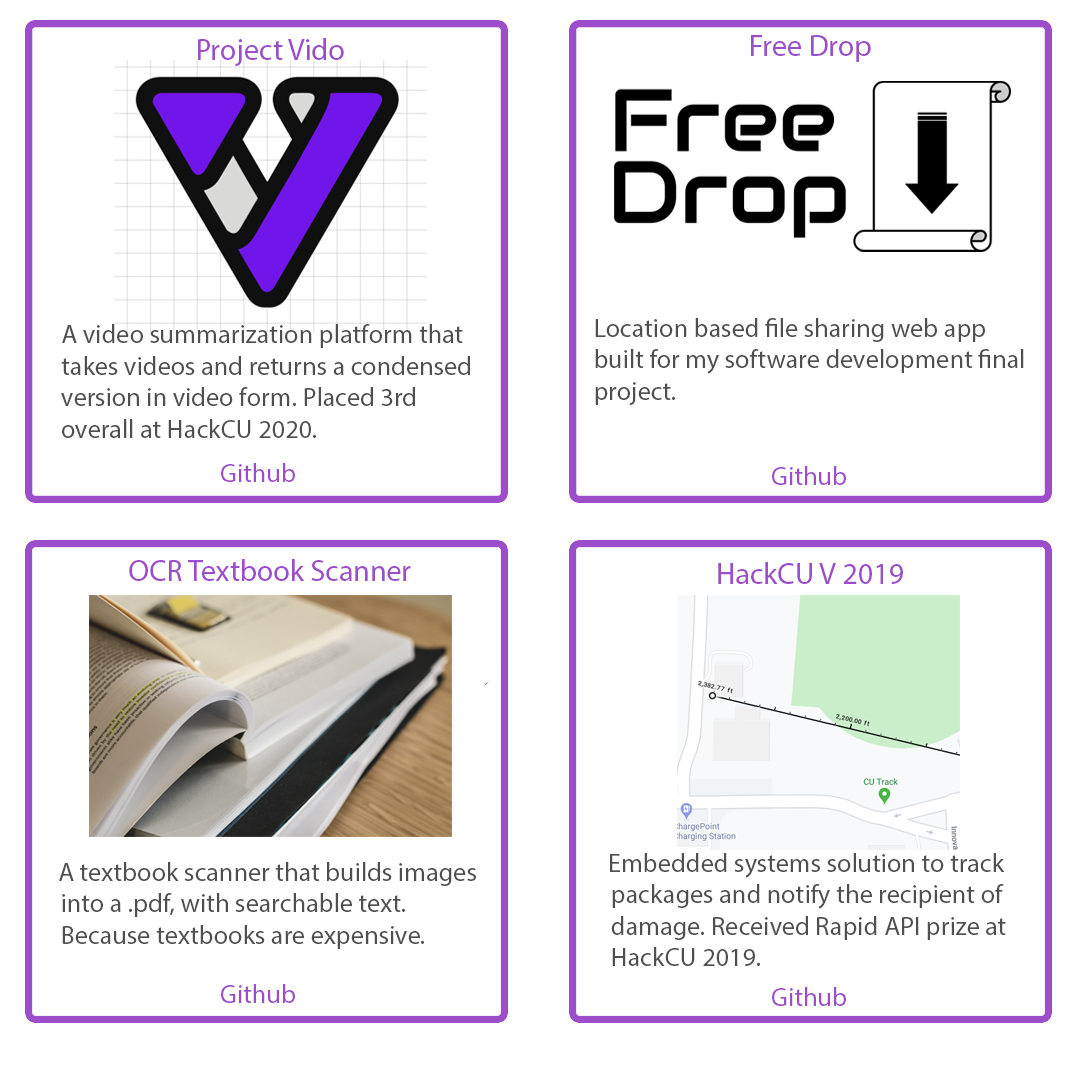
<style>
.page{position:relative;width:1080px;height:1080px;background:#ffffff}
.page>*{position:absolute;margin:0}
.t1{font:30px "MyriadPro-Regular";color:#9b4dca}
.t2{font:26.3px "MyriadPro-Regular";color:#4f4f4f}
.t3{font:26.2px "MyriadPro-Regular";color:#9b4dca}
</style>
<div class="page">
<p class="t1" style="left:198px;top:38px;width:146px;height:28px">Project Vido</p>
<p class="t1" style="left:751px;top:35px;width:120px;height:27px">Free Drop</p>
<p class="t2" style="left:595px;top:318px;width:429px;height:87px">Location based file sharing web app<br>built for my software development final<br>project.</p>
<p class="t2" style="left:61px;top:324px;width:409px;height:114px">A video summarization platform that<br>takes videos and returns a condensed<br>version in video form. Placed 3rd <br>overall at HackCU 2020.</p>
<p class="t3" style="left:221px;top:463px;width:74px;height:19px">Github</p>
<p class="t3" style="left:772px;top:466px;width:74px;height:19px">Github</p>
<p class="t1" style="left:129px;top:559px;width:282px;height:22px">OCR Textbook Scanner</p>
<p class="t1" style="left:718px;top:562px;width:185px;height:22px">HackCU V 2019</p>
<p class="t2" style="left:610px;top:853px;width:396px;height:113px">Embedded systems solution to track <br>packages and notify the recipient of<br>damage. Received Rapid API prize at <br>HackCU 2019.</p>
<p class="t2" style="left:59px;top:862px;width:417px;height:87px">A textbook scanner that builds images <br>into a .pdf, with searchable text. <br>Because textbooks are expensive.</p>
<p class="t3" style="left:221px;top:984px;width:74px;height:19px">Github</p>
<p class="t3" style="left:772px;top:987px;width:74px;height:19px">Github</p>
</div>
